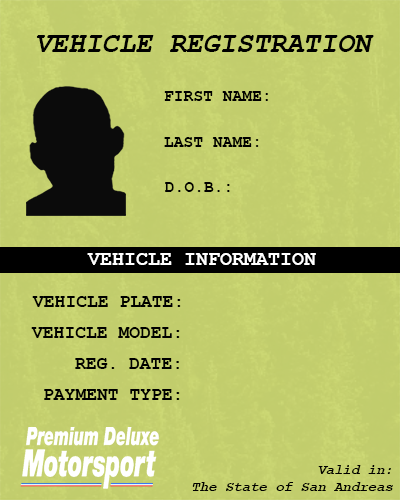
<style>
.page{position:relative;width:400px;height:500px}
.page>*{position:absolute;margin:0}
.t1{font:29.2px "CourierNewPS-BoldItalicMT";color:#000000;scale:0.96 1}
.t2{font:17px "CourierNewPS-BoldMT";color:#000000;scale:0.96 1}
.t3{font:20px "CourierNewPS-BoldMT";color:#ffffff}
.t4{font:18px "CourierNewPS-BoldMT";color:#000000}
.t5{font:14px "CourierNewPS-BoldItalicMT";color:#000000}
</style>
<div class="page">
<p class="t1" style="left:36px;top:35px;width:338px;height:17px">VEHICLE REGISTRATION</p>
<p class="t2" style="left:164px;top:91px;width:104px;height:10px">FIRST NAME:</p>
<p class="t2" style="left:164px;top:137px;width:95px;height:10px">LAST NAME:</p>
<p class="t2" style="left:165px;top:182px;width:65px;height:10px">D.O.B.:</p>
<p class="t3" style="left:87px;top:253px;width:229px;height:12px">VEHICLE INFORMATION</p>
<p class="t4" style="left:32px;top:296px;width:149px;height:11px">VEHICLE PLATE:</p>
<p class="t4" style="left:31px;top:327px;width:149px;height:11px">VEHICLE MODEL:</p>
<p class="t4" style="left:75px;top:358px;width:104px;height:11px">REG. DATE:</p>
<p class="t4" style="left:44px;top:389px;width:136px;height:11px">PAYMENT TYPE:</p>
<p class="t5" style="left:192px;top:465px;width:201px;height:26px;text-align:right">Valid in:<br>The State of San Andreas</p>
</div>
